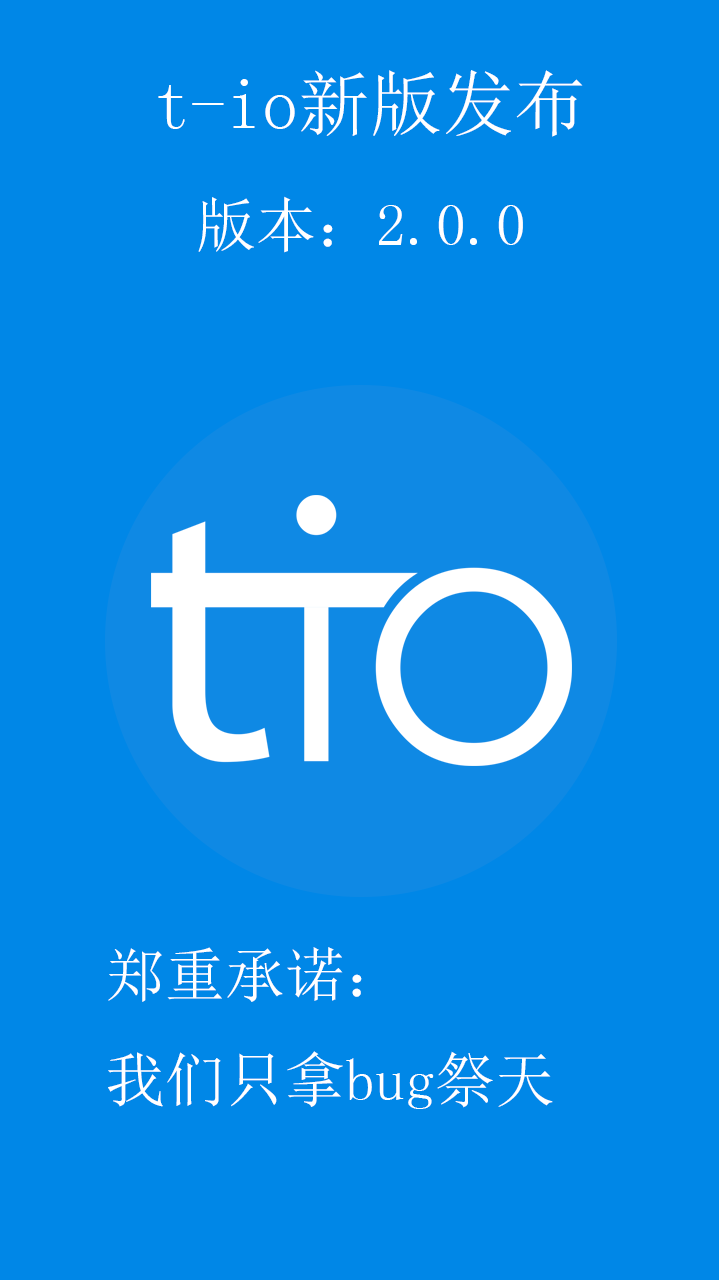
<style>
.page{position:relative;width:719px;height:1280px;background:#0087e7}
.page>*{position:absolute;margin:0}
.t1{font:72px "SimSun";color:#ffffff}
.t2{font:60px "SimSun";color:#ffffff}
</style>
<div class="page">
<p class="t1" style="left:158px;top:70px;width:425px;height:67px">t-io新版发布</p>
<p class="t2" style="left:198px;top:196px;width:325px;height:57px">版本：2.0.0</p>
<p class="t2" style="left:108px;top:947px;width:445px;height:162px">郑重承诺：<br>我们只拿bug祭天</p>
</div>
